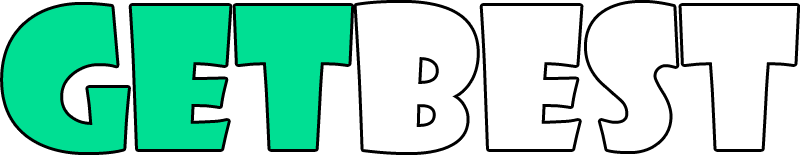
<style>
.page{position:relative;width:800px;height:155px;background:#ffffff}
.page>*{position:absolute;margin:0}
.t1{font:190px "ShowcardGothic-Reg";color:#ffffff}
.t2{font:190px "ShowcardGothic-Reg";color:#00df93}
</style>
<div class="page">
<p class="t1" style="left:3px;top:3px;width:795px;height:149px"><span class="t2">Get</span>Best</p>
</div>
